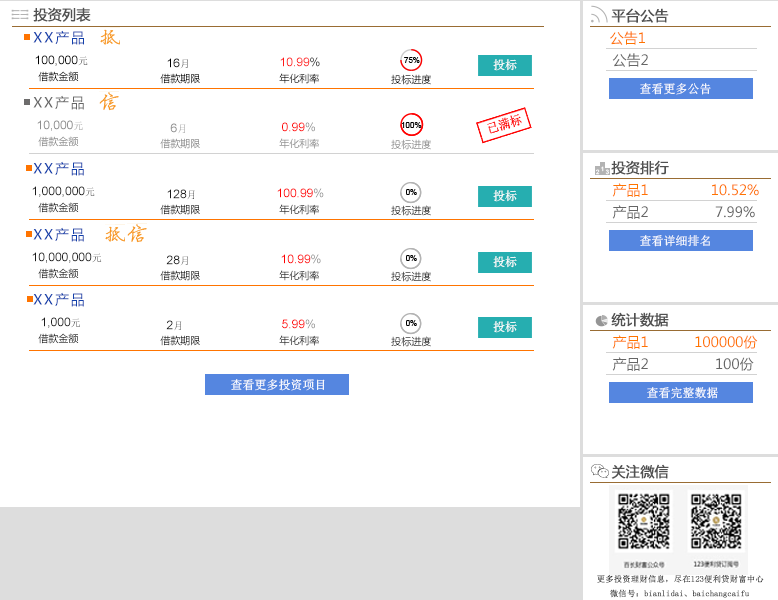
<style>
.page{position:relative;width:778px;height:600px;background:#ffffff}
.page>*{position:absolute;margin:0}
.t1{font:14px "MicrosoftYaHei";color:#515151;font-weight:bold}
.t2{font:14px "MicrosoftYaHei";letter-spacing:0.14em;color:#1240ab}
.t3{font:14px "MicrosoftYaHei";color:#ff7400}
.t4{font:14px "MicrosoftYaHei";color:#666666}
.t5{font:12px "ArialMT";color:#000000}
.t6{font:10px "NSimSun";color:#000000}
.t7{font:10px "SimSun";color:#000000}
.t8{font:12px "ArialMT";color:#ff1919}
.t9{font:12px "NSimSun";color:#ffffff}
.t10{font:10px "MicrosoftYaHei";color:#000000}
.t11{font:10px "MicrosoftYaHei"}
.t12{font:14px "MicrosoftYaHei";letter-spacing:0.13em;color:#666666}
.t13{font:12px "ArialMT";color:#8e8e8e}
.t14{font:10px "NSimSun";color:#8e8e8e}
.t15{font:10px "SimSun";color:#8e8e8e}
.t16{font:12px "ArialMT";color:#ff0000}
.t17{font:10px "MicrosoftYaHei";color:#8e8e8e}
.t18{font:14px "MicrosoftYaHei";letter-spacing:0.13em;color:#1240ab}
.t19{font:12px "ArialMT";color:#1c1c1c}
.t20{font:10px "NSimSun";color:#1c1c1c}
.t21{font:10px "SimSun";color:#1c1c1c}
.t22{font:10px "MicrosoftYaHei";color:#1c1c1c}
.t23{font:8.3px "SimSun";color:#333333;font-weight:bold}
</style>
<div class="page">
<p class="t1" style="left:33px;top:7px;width:58px;height:15px">投资列表</p>
<p class="t1" style="left:611px;top:8px;width:58px;height:15px">平台公告</p>
<p class="t2" style="left:33px;top:30px;width:51px;height:15px">XX产品</p>
<p class="t3" style="left:610px;top:31px;width:35px;height:14px">公告1</p>
<p class="t4" style="left:612px;top:53px;width:36px;height:14px">公告2</p>
<p class="t5" style="left:35px;top:55px;width:53px;height:11px">100,000<span class="t6">元</span></p>
<p class="t5" style="left:167px;top:58px;width:21px;height:11px">16<span class="t7">月</span></p>
<p class="t8" style="left:280px;top:57px;width:40px;height:10px">10.99%</p>
<p class="t9" style="left:493px;top:59px;width:24px;height:12px">投标</p>
<p class="t10" style="left:38px;top:71px;width:41px;height:11px">借款金额</p>
<p class="t10" style="left:160px;top:73px;width:40px;height:11px">借款期限</p>
<p class="t11" style="left:279px;top:73px;width:40px;height:11px">年化利率</p>
<p class="t10" style="left:391px;top:74px;width:40px;height:11px">投标进度</p>
<p class="t9" style="left:640px;top:83px;width:71px;height:12px">查看更多公告</p>
<p class="t12" style="left:33px;top:95px;width:51px;height:15px">XX产品</p>
<p class="t13" style="left:37px;top:120px;width:46px;height:11px">10,000<span class="t14">元</span></p>
<p class="t13" style="left:170px;top:123px;width:16px;height:11px">6<span class="t15">月</span></p>
<p class="t16" style="left:282px;top:122px;width:33px;height:10px">0.99%</p>
<p class="t17" style="left:38px;top:136px;width:41px;height:11px">借款金额</p>
<p class="t17" style="left:160px;top:138px;width:40px;height:11px">借款期限</p>
<p class="t11" style="left:279px;top:138px;width:40px;height:11px">年化利率</p>
<p class="t17" style="left:391px;top:139px;width:40px;height:11px">投标进度</p>
<p class="t18" style="left:33px;top:161px;width:51px;height:15px">XX产品</p>
<p class="t1" style="left:611px;top:160px;width:58px;height:15px">投资排行</p>
<p class="t3" style="left:612px;top:183px;width:147px;height:14px">产品1               10.52%</p>
<p class="t19" style="left:32px;top:186px;width:63px;height:11px">1,000,000<span class="t20">元</span></p>
<p class="t19" style="left:167px;top:189px;width:28px;height:11px">128<span class="t21">月</span></p>
<p class="t16" style="left:277px;top:188px;width:47px;height:10px">100.99%</p>
<p class="t9" style="left:493px;top:190px;width:24px;height:12px">投标</p>
<p class="t22" style="left:38px;top:202px;width:41px;height:11px">借款金额</p>
<p class="t22" style="left:160px;top:204px;width:40px;height:11px">借款期限</p>
<p class="t11" style="left:279px;top:204px;width:40px;height:11px">年化利率</p>
<p class="t22" style="left:391px;top:205px;width:40px;height:11px">投标进度</p>
<p class="t4" style="left:612px;top:205px;width:143px;height:14px">产品2                7.99%</p>
<p class="t18" style="left:33px;top:227px;width:51px;height:15px">XX产品</p>
<p class="t9" style="left:640px;top:235px;width:70px;height:12px">查看详细排名</p>
<p class="t19" style="left:32px;top:252px;width:70px;height:11px">10,000,000<span class="t20">元</span></p>
<p class="t19" style="left:166px;top:255px;width:22px;height:11px">28<span class="t21">月</span></p>
<p class="t16" style="left:281px;top:254px;width:40px;height:10px">10.99%</p>
<p class="t9" style="left:493px;top:256px;width:24px;height:12px">投标</p>
<p class="t22" style="left:38px;top:268px;width:41px;height:11px">借款金额</p>
<p class="t22" style="left:160px;top:270px;width:40px;height:11px">借款期限</p>
<p class="t11" style="left:279px;top:270px;width:40px;height:11px">年化利率</p>
<p class="t22" style="left:391px;top:271px;width:40px;height:11px">投标进度</p>
<p class="t18" style="left:33px;top:292px;width:51px;height:15px">XX产品</p>
<p class="t19" style="left:41px;top:317px;width:39px;height:11px">1,000<span class="t20">元</span></p>
<p class="t1" style="left:611px;top:312px;width:58px;height:15px">统计数据</p>
<p class="t19" style="left:166px;top:320px;width:16px;height:11px">2<span class="t21">月</span></p>
<p class="t16" style="left:282px;top:319px;width:33px;height:10px">5.99%</p>
<p class="t9" style="left:493px;top:321px;width:24px;height:12px">投标</p>
<p class="t22" style="left:38px;top:333px;width:41px;height:11px">借款金额</p>
<p class="t22" style="left:160px;top:335px;width:40px;height:11px">借款期限</p>
<p class="t11" style="left:279px;top:335px;width:40px;height:11px">年化利率</p>
<p class="t22" style="left:391px;top:336px;width:40px;height:11px">投标进度</p>
<p class="t3" style="left:612px;top:335px;width:146px;height:14px">产品1           100000份</p>
<p class="t4" style="left:612px;top:357px;width:142px;height:14px">产品2                100份</p>
<p class="t9" style="left:231px;top:379px;width:94px;height:12px">查看更多投资项目</p>
<p class="t9" style="left:647px;top:387px;width:71px;height:12px">查看完整数据</p>
<p class="t1" style="left:611px;top:464px;width:58px;height:15px">关注微信</p>
<p class="t23" style="left:597px;top:575px;width:167px;height:23px">更多投资理财信息，尽在123便利贷财富中心<br>   微信号：bianlidai、baichangcaifu</p>
</div>
